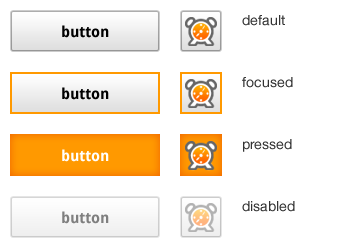
<style>
.page{position:relative;width:350px;height:250px;background:#ffffff}
.page>*{position:absolute;margin:0}
.t1{font:14px/62px "HelveticaNeue-Roman";color:#333333}
.t2{font:15px "DroidSans-Bold";color:#000000}
.t3{font:15px "DroidSans-Bold";color:#ffffff}
.t4{font:15px "DroidSans-Bold";color:#7f7f7f}
</style>
<div class="page">
<p class="t1" style="left:242px;top:15px;width:53px;height:197px">default<br>focused<br>pressed<br>disabled</p>
<p class="t2" style="left:62px;top:25px;width:47px;height:13px">button</p>
<p class="t2" style="left:62px;top:87px;width:47px;height:13px">button</p>
<p class="t3" style="left:62px;top:149px;width:47px;height:13px">button</p>
<p class="t4" style="left:62px;top:211px;width:47px;height:13px">button</p>
</div>
